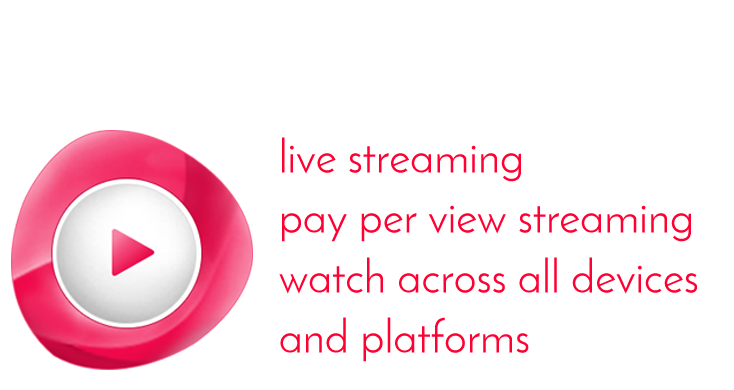
<style>
.page{position:relative;width:734px;height:390px;background:#ffffff}
.page>*{position:absolute;margin:0}
.t1{font:45.5px/60px "JosefinSans";color:#ff0033}
</style>
<div class="page">
<p class="t1" style="left:279px;top:137px;width:419px;height:225px">live streaming<br>pay per view streaming<br>watch across all devices<br>and platforms</p>
</div>
